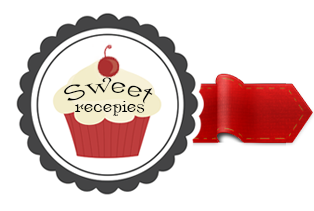
<style>
.page{position:relative;width:314px;height:211px;background:#ffffff}
.page>*{position:absolute;margin:0}
.t1{font:23.9px "Ametist";color:#000102;scale:1.06 1}
.t2{font:18.1px "Ametist";color:#000102}
</style>
<div class="page">
<p class="t1" style="left:64px;top:77px;width:89px;height:27px">Sweet</p>
<p class="t2" style="left:75px;top:101px;width:70px;height:15px">recepies</p>
</div>
